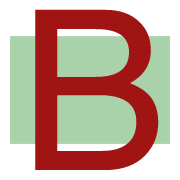
<style>
.page{position:relative;width:180px;height:180px;background:#ffffff}
.page>*{position:absolute;margin:0}
.t1{font:221.5px "Helvetica";color:#a01414}
</style>
<div class="page">
<p class="t1" style="left:35px;top:9px;width:124px;height:161px">B</p>
</div>
